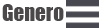
<style>
.page{position:relative;width:100px;height:28px;background:#ffffff}
.page>*{position:absolute;margin:0}
.t1{font:20.8px "Impact";color:#4a4848}
</style>
<div class="page">
<p class="t1" style="left:2px;top:4px;width:62px;height:17px">Genero</p>
</div>
